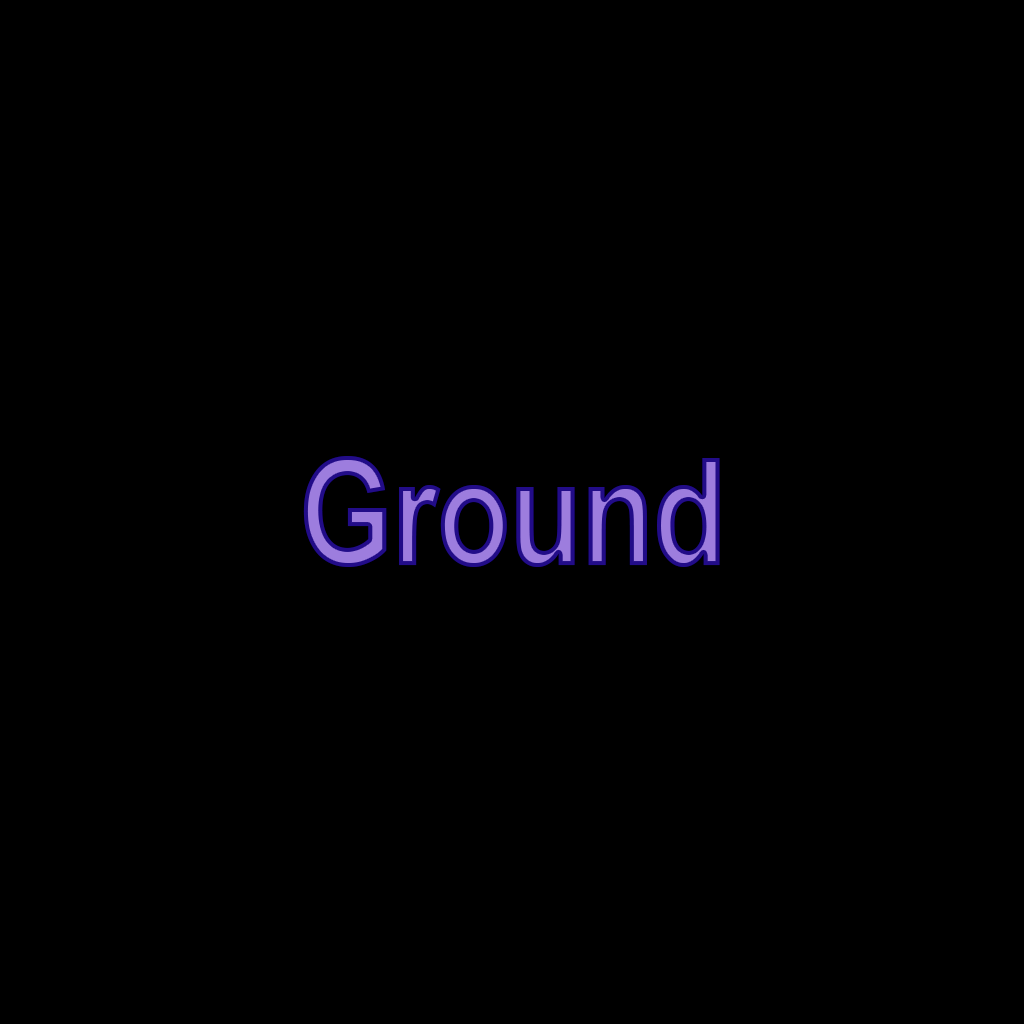
<style>
.page{position:relative;width:1024px;height:1024px;background:#000000}
.page>*{position:absolute;margin:0}
.t1{font:150px "ArialNarrow-Bold";letter-spacing:-0.02em}
</style>
<div class="page">
<p class="t1" style="left:303px;top:456px;width:417px;height:111px">Ground</p>
</div>
